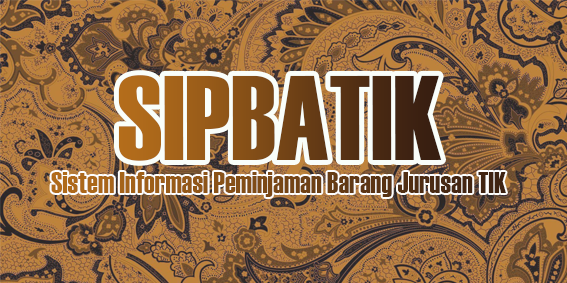
<style>
.page{position:relative;width:567px;height:283px}
.page>*{position:absolute;margin:0}
.t1{font:120px "Haettenschweiler"}
.t2{font:30px "Haettenschweiler"}
</style>
<div class="page">
<p class="t1" style="left:118px;top:75px;width:324px;height:86px">SIPBATIK</p>
<p class="t2" style="left:51px;top:172px;width:455px;height:25px">Sistem Informasi Peminjaman Barang Jurusan TIK</p>
</div>
